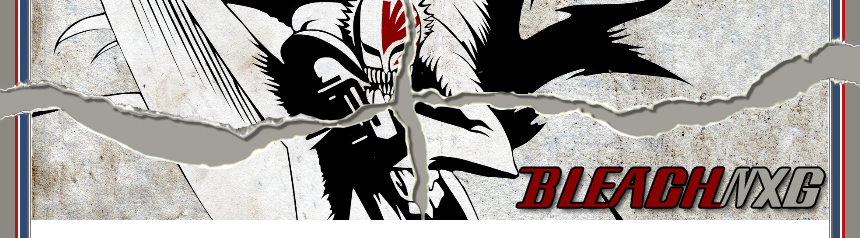
<style>
.page{position:relative;width:860px;height:238px}
.page>*{position:absolute;margin:0}
.t1{font:48px "Bleach";letter-spacing:0.025em;color:#850102}
.t2{font:48px "Bleach";letter-spacing:0.025em;color:#a1a199}
</style>
<div class="page">
<p class="t1" style="left:517px;top:168px;width:307px;height:39px">BLEACH<span class="t2">NXG</span></p>
</div>
